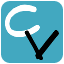
<style>
.page{position:relative;width:64px;height:64px;background:#42a8c0}
.page>*{position:absolute;margin:0}
.t1{font:45px "Flux-Architect";color:#ffffff}
.t2{font:45px "Flux-Architect";color:#000000}
</style>
<div class="page">
<p class="t1" style="left:5px;top:4px;width:35px;height:33px">C</p>
<p class="t2" style="left:24px;top:30px;width:35px;height:31px">V</p>
</div>
